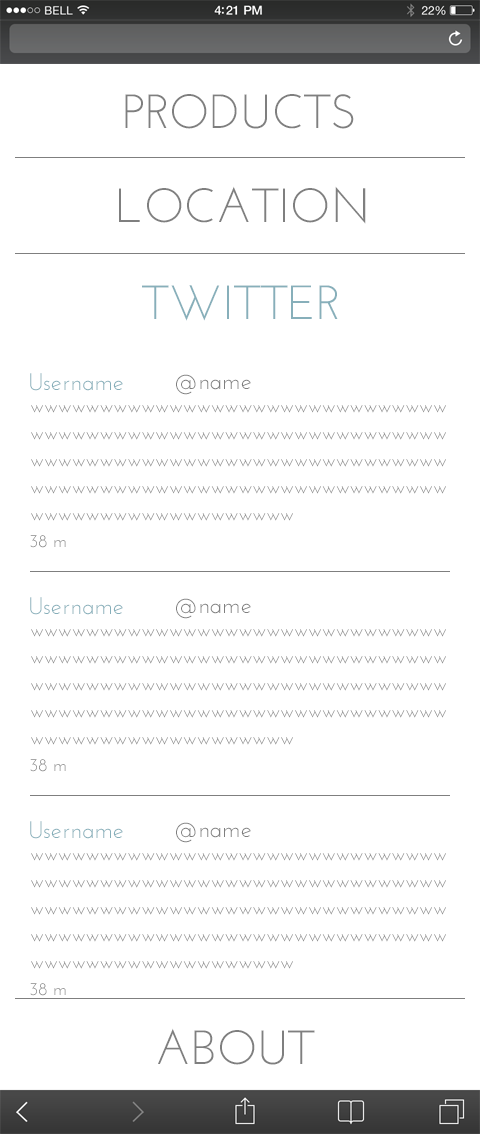
<style>
.page{position:relative;width:480px;height:1134px;background:#ffffff}
.page>*{position:absolute;margin:0}
.t1{font:48px "JosefinSans";color:#7f7f7f}
.t2{font:48px "JosefinSans";color:#87afba}
.t3{font:24px "JosefinSans";color:#87afba}
.t4{font:24px "JosefinSans";color:#7f7f7f}
.t5{font:18px/27px "JosefinSans"}
.t6{font:18px "JosefinSans"}
</style>
<div class="page">
<p class="t1" style="left:125px;top:94px;width:229px;height:35px">PRODUCTS</p>
<p class="t1" style="left:119px;top:186px;width:247px;height:38px">LOCATION</p>
<p class="t2" style="left:142px;top:285px;width:196px;height:36px">TWITTER</p>
<p class="t3" style="left:30px;top:373px;width:93px;height:18px">Username</p>
<p class="t4" style="left:176px;top:374px;width:75px;height:21px">@name</p>
<p class="t5" style="left:31px;top:405px;width:415px;height:116px">wwwwwwwwwwwwwwwwwwwwwwwwwwwwwwwwwwwwwwwwwwwwwwwwwwwwwwwwwwwwwwwwwwwwwwwwwwwwwwwwwwwwwwwwwwwwwwwwwwwwwwwwwwwwwwwwwwwwwwwwwwwwwwwwwwwwwwwwwww</p>
<p class="t6" style="left:30px;top:535px;width:36px;height:13px">38 m</p>
<p class="t3" style="left:30px;top:597px;width:93px;height:18px">Username</p>
<p class="t4" style="left:176px;top:598px;width:75px;height:21px">@name</p>
<p class="t5" style="left:31px;top:629px;width:415px;height:116px">wwwwwwwwwwwwwwwwwwwwwwwwwwwwwwwwwwwwwwwwwwwwwwwwwwwwwwwwwwwwwwwwwwwwwwwwwwwwwwwwwwwwwwwwwwwwwwwwwwwwwwwwwwwwwwwwwwwwwwwwwwwwwwwwwwwwwwwwwww</p>
<p class="t6" style="left:30px;top:759px;width:36px;height:13px">38 m</p>
<p class="t3" style="left:30px;top:821px;width:93px;height:18px">Username</p>
<p class="t4" style="left:176px;top:822px;width:75px;height:21px">@name</p>
<p class="t5" style="left:31px;top:853px;width:415px;height:116px">wwwwwwwwwwwwwwwwwwwwwwwwwwwwwwwwwwwwwwwwwwwwwwwwwwwwwwwwwwwwwwwwwwwwwwwwwwwwwwwwwwwwwwwwwwwwwwwwwwwwwwwwwwwwwwwwwwwwwwwwwwwwwwwwwwwwwwwwwww</p>
<p class="t6" style="left:30px;top:983px;width:36px;height:13px">38 m</p>
<p class="t1" style="left:158px;top:1028px;width:157px;height:37px">ABOUT</p>
</div>
